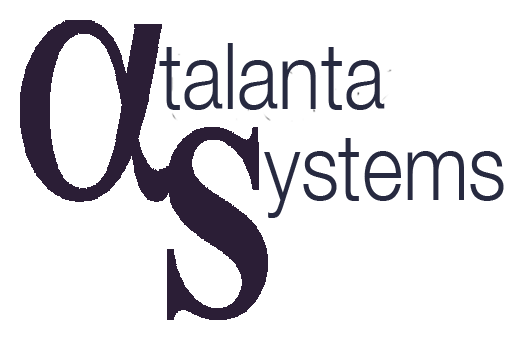
<style>
.page{position:relative;width:520px;height:349px;background:#ffffff}
.page>*{position:absolute;margin:0}
.t1{font:92.5px "HelveticaNeue-Light";color:#272a40;scale:0.85 1}
</style>
<div class="page">
<p class="t1" style="left:159px;top:43px;width:226px;height:67px">talanta</p>
<p class="t1" style="left:264px;top:138px;width:240px;height:80px">ystems</p>
</div>
